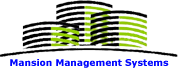
<style>
.page{position:relative;width:178px;height:70px;background:#ffffff}
.page>*{position:absolute;margin:0}
.t1{font:9.2px "Verdana-Bold";color:#0006ff}
</style>
<div class="page">
<p class="t1" style="left:10px;top:59px;width:159px;height:9px">Mansion Management Systems</p>
</div>
